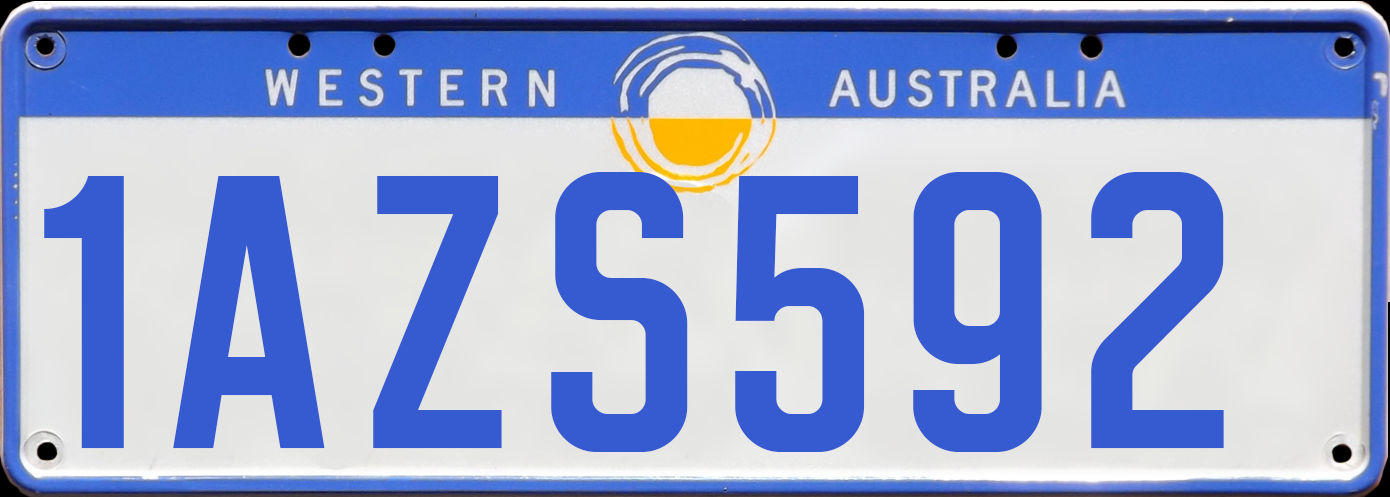
<style>
.page{position:relative;width:1390px;height:497px;background:#365bd0}
.page>*{position:absolute;margin:0}
.t1{font:400px "DancingJuiceSalabat";letter-spacing:0.1em;color:#365bd0}
</style>
<div class="page">
<p class="t1" style="left:44px;top:172px;width:1180px;height:280px">1AZS592</p>
</div>
